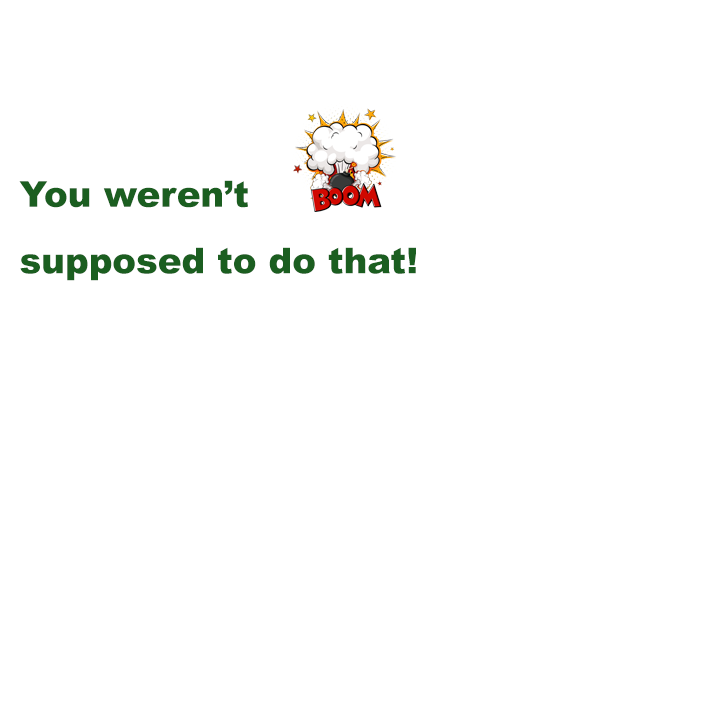
<style>
.page{position:relative;width:720px;height:720px;background:#ffffff}
.page>*{position:absolute;margin:0}
.t1{font:35.6px/66.7px "Arial-Black";color:#1b5e20}
</style>
<div class="page">
<p class="t1" style="left:19px;top:180px;width:397px;height:101px">You weren’t <br>supposed to do that!</p>
</div>
